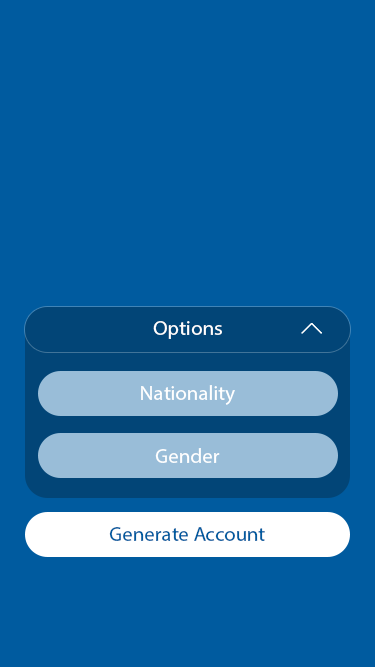
<style>
.page{position:relative;width:375px;height:667px;background:#005b9f}
.page>*{position:absolute;margin:0}
.t1{font:20.8px "MyriadPro-Regular";color:#ffffff}
.t2{font:20.8px "MyriadPro-Regular";color:#005b9f}
</style>
<div class="page">
<p class="t1" style="left:153px;top:321px;width:69px;height:18px">Options</p>
<p class="t1" style="left:141px;top:385px;width:94px;height:20px">Nationality</p>
<p class="t1" style="left:155px;top:448px;width:65px;height:15px">Gender</p>
<p class="t2" style="left:109px;top:527px;width:156px;height:14px">Generate Account</p>
</div>
